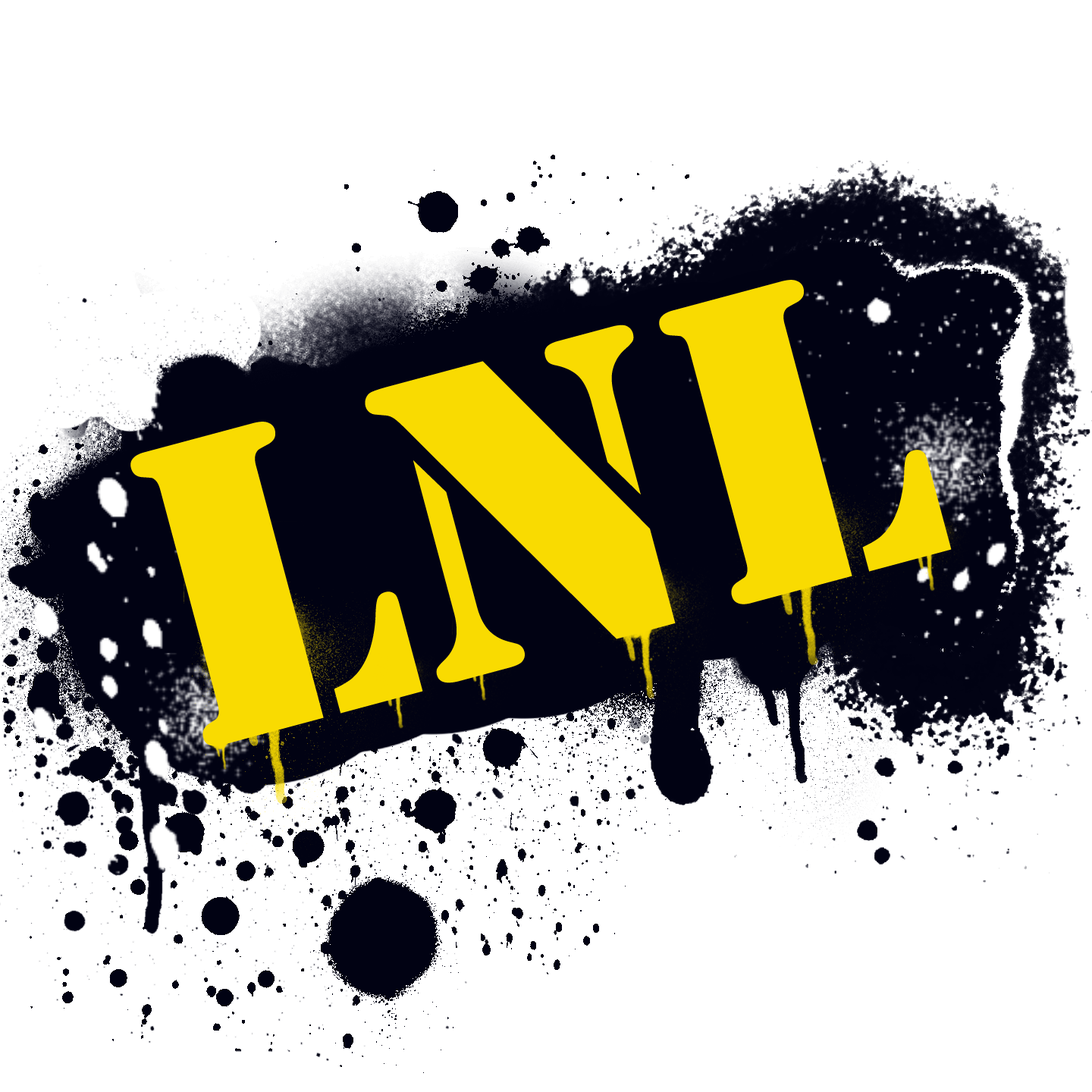
<style>
.page{position:relative;width:1092px;height:1092px;background:#ffffff}
.page>*{position:absolute;margin:0}
.t1{font:454.3px "Stencil";color:#f9db01}
</style>
<div class="page">
<p class="t1" style="left:130px;top:280px;width:822px;height:466px;rotate:-15deg">LNL</p>
</div>
